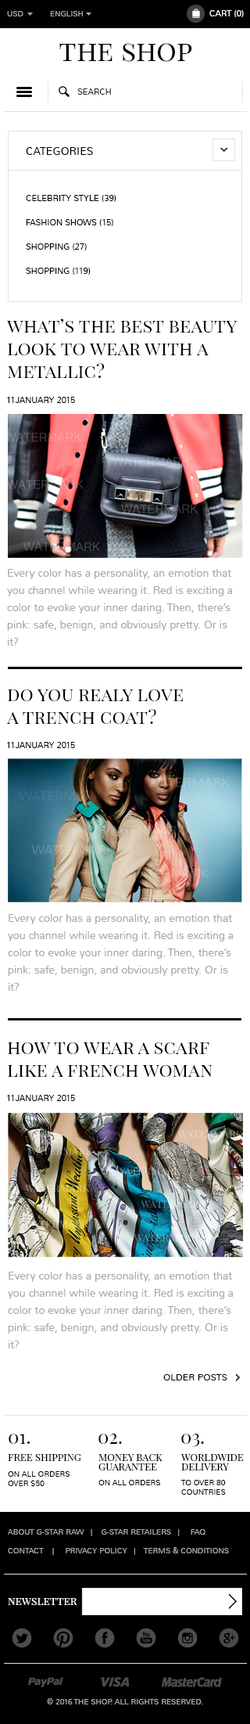
<style>
.page{position:relative;width:250px;height:1724px;background:#ffffff}
.page>*{position:absolute;margin:0}
.t1{font:7.8px "Nunito-Light";color:#aaaaaa;text-transform:uppercase}
.t2{font:8.6px "Nunito-Light";color:#ffffff;text-transform:uppercase}
.t3{font:28.2px "PlayfairDisplaySC-Regular";color:#000000}
.t4{font:8.6px "Nunito-Light";color:#282828;text-transform:uppercase}
.t5{font:11px "Nunito-Light";color:#000000;text-transform:uppercase}
.t6{font:8.6px "Nunito-Light";color:#000000;text-transform:uppercase}
.t7{font:18.8px "PlayfairDisplaySC-Regular";color:#000000}
.t8{font:11px/17.2px "Nunito-Light";color:#aaaaaa}
.t9{font:9.4px "Nunito-Light";color:#000000;text-transform:uppercase}
.t10{font:10.2px "PlayfairDisplaySC-Regular";color:#000000;text-transform:uppercase}
.t11{font:10.2px/9.4px "PlayfairDisplaySC-Regular";color:#000000;text-transform:uppercase}
.t12{font:7.8px "Nunito-Light";color:#000000;text-transform:uppercase}
.t13{font:7.8px/18.8px "Nunito-Light";color:#aaaaaa;text-transform:uppercase}
.t14{font:11px "PlayfairDisplaySC-Regular";color:#ffffff}
</style>
<div class="page">
<p class="t1" style="left:7px;top:11px;width:16px;height:5px">usD</p>
<p class="t1" style="left:50px;top:11px;width:33px;height:5px">English</p>
<p class="t2" style="left:210px;top:10px;width:34px;height:7px">Cart (0)</p>
<p class="t3" style="left:59px;top:43px;width:134px;height:19px">the shop</p>
<p class="t4" style="left:77px;top:88px;width:34px;height:7px">search</p>
<p class="t5" style="left:26px;top:147px;width:67px;height:8px">Categories</p>
<p class="t6" style="left:26px;top:195px;width:91px;height:7px">Celebrity Style (39)</p>
<p class="t6" style="left:26px;top:219px;width:87px;height:7px">Fashion Shows (15)</p>
<p class="t6" style="left:26px;top:243px;width:61px;height:7px">Shopping (27)</p>
<p class="t6" style="left:26px;top:268px;width:65px;height:7px">Shopping (119)</p>
<p class="t7" style="left:6px;top:319px;width:231px;height:59px">what’s the best beauty<br>look to wear with a metallic?</p>
<p class="t6" style="left:7px;top:397px;width:68px;height:6px">11January 2015</p>
<p class="t8" style="left:7px;top:569px;width:225px;height:77px">Every color has a personality, an emotion that you channel while wearing it. Red is exciting a color to evoke your inner daring. Then, there’s pink: safe, benign, and obviously pretty. Or is it?</p>
<p class="t7" style="left:6px;top:689px;width:177px;height:35px">do you realy love<br>a trench coat?</p>
<p class="t6" style="left:7px;top:742px;width:68px;height:6px">11January 2015</p>
<p class="t8" style="left:8px;top:914px;width:225px;height:77px">Every color has a personality, an emotion that you channel while wearing it. Red is exciting a color to evoke your inner daring. Then, there’s pink: safe, benign, and obviously pretty. Or is it?</p>
<p class="t7" style="left:8px;top:1042px;width:205px;height:35px">how to wear a scarf<br>like a french woman</p>
<p class="t6" style="left:7px;top:1095px;width:68px;height:6px">11January 2015</p>
<p class="t8" style="left:8px;top:1272px;width:225px;height:76px">Every color has a personality, an emotion that you channel while wearing it. Red is exciting a color to evoke your inner daring. Then, there’s pink: safe, benign, and obviously pretty. Or is it?</p>
<p class="t9" style="left:164px;top:1374px;width:64px;height:7px">older posts</p>
<p class="t7" style="left:9px;top:1434px;width:21px;height:10px">01.</p>
<p class="t7" style="left:99px;top:1434px;width:23px;height:10px">02.</p>
<p class="t7" style="left:182px;top:1434px;width:22px;height:13px">03.</p>
<p class="t10" style="left:8px;top:1454px;width:73px;height:7px">Free Shipping</p>
<p class="t11" style="left:99px;top:1454px;width:64px;height:17px">Money back<br>guarantee</p>
<p class="t11" style="left:181px;top:1454px;width:63px;height:17px">Worldwide<br>Delivery</p>
<p class="t12" style="left:8px;top:1471px;width:62px;height:16px">On all orders<br>over $50</p>
<p class="t12" style="left:99px;top:1480px;width:62px;height:5px">On all orders</p>
<p class="t12" style="left:182px;top:1480px;width:44px;height:15px">To over 80<br>countries</p>
<p class="t13" style="left:8px;top:1529px;width:221px;height:26px">About G-Star Raw   |    G-Star Retailers   |     FAQ<br>Contact    |     Privacy Policy   |    Terms &amp; Conditions</p>
<p class="t14" style="left:8px;top:1598px;width:69px;height:7px">newsletter</p>
<p class="t1" style="left:47px;top:1698px;width:156px;height:7px">© 2016 the shop. All Rights Reserved.</p>
</div>
